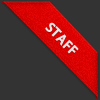
<style>
.page{position:relative;width:100px;height:100px;background:#333333}
.page>*{position:absolute;margin:0}
.t1{font:14px "MyriadPro-Semibold";color:#e6e6e6;font-weight:bold}
</style>
<div class="page">
<p class="t1" style="left:45px;top:22px;width:34px;height:32px;rotate:46deg">STAFF</p>
</div>
